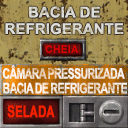
<style>
.page{position:relative;width:128px;height:128px}
.page>*{position:absolute;margin:0}
.t1{font:14.8px/16.6px "Arial-BoldMT";letter-spacing:0.007em;color:#dededa;text-transform:uppercase}
.t2{font:10.7px "Arial-BoldMT";color:#d90303;text-transform:uppercase;scale:0.97 1}
.t3{font:14.7px/14.7px "Arial-BoldMT";letter-spacing:-0.08em;text-transform:uppercase;scale:0.71 1}
.t4{font:16px "Arial-BoldMT";letter-spacing:-0.04em;color:#f72100;text-transform:uppercase;font-weight:bold;scale:0.7 1}
</style>
<div class="page">
<p class="t1" style="left:5px;top:6px;width:119px;height:29px;text-align:center">bacia de<br>refrigerante</p>
<p class="t2" style="left:45px;top:45px;width:33px;height:8px">cheiA</p>
<p class="t3" style="left:2px;top:65px;width:125px;height:29px;text-align:center">câmara PRESSURIZADA <br>bacia de refrigerante</p>
<p class="t4" style="left:7px;top:105px;width:48px;height:13px">SELADA</p>
</div>
